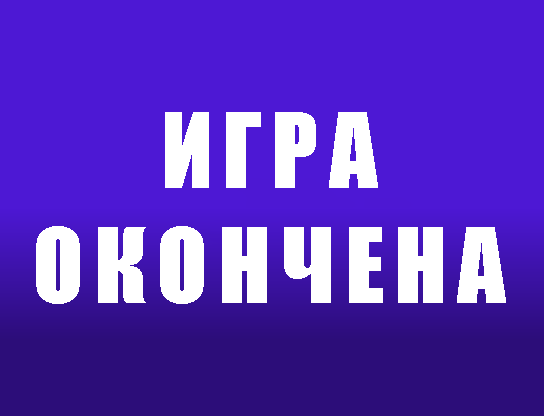
<style>
.page{position:relative;width:544px;height:416px;background:#4d18d4}
.page>*{position:absolute;margin:0}
.t1{font:96px "Impact";letter-spacing:0.1em;color:#ffffff}
</style>
<div class="page">
<p class="t1" style="left:36px;top:112px;width:470px;height:192px;text-align:center">ИГРА<br>ОКОНЧЕНА</p>
</div>
